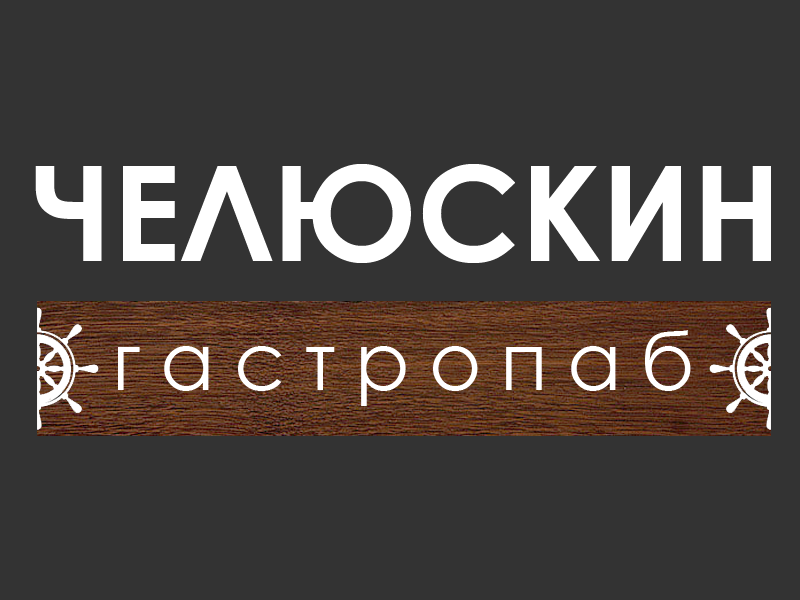
<style>
.page{position:relative;width:800px;height:600px;background:#333333}
.page>*{position:absolute;margin:0}
.t1{font:131.8px "CenturyGothic-Bold";color:#ffffff}
.t2{font:80px "CenturyGothic";letter-spacing:0.24em;color:#ffffff}
</style>
<div class="page">
<p class="t1" style="left:35px;top:164px;width:736px;height:99px">ЧЕЛЮСКИН</p>
<p class="t2" style="left:118px;top:330px;width:573px;height:76px">гастропаб</p>
</div>
